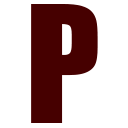
<style>
.page{position:relative;width:128px;height:128px;background:#ffffff}
.page>*{position:absolute;margin:0}
.t1{font:150px "Impact";color:#460000}
</style>
<div class="page">
<p class="t1" style="left:31px;top:4px;width:67px;height:119px">P</p>
</div>
